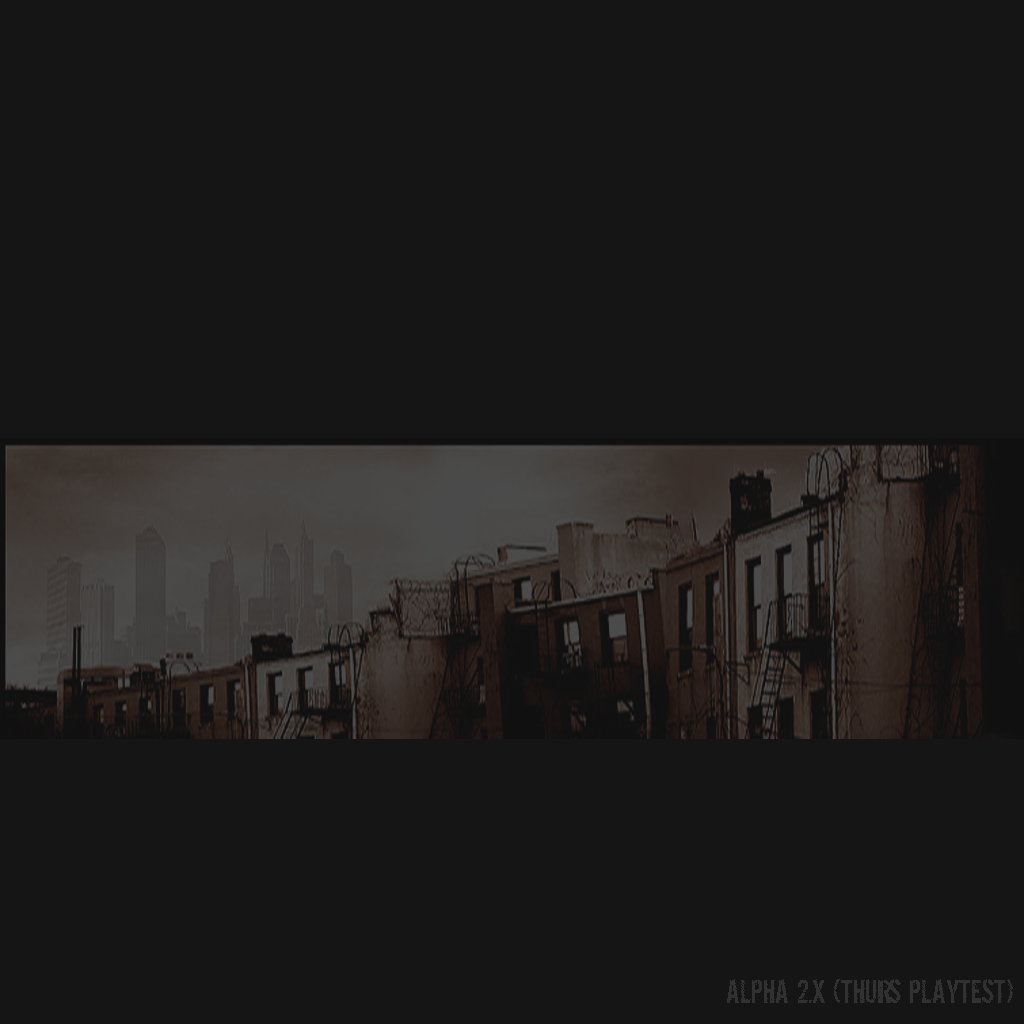
<style>
.page{position:relative;width:1024px;height:1024px;background:#151515}
.page>*{position:absolute;margin:0}
.t1{font:30px "DirtyEgo";color:#313131}
</style>
<div class="page">
<p class="t1" style="left:727px;top:979px;width:286px;height:24px">ALPHA 2.X (THURS PLAYTEST)</p>
</div>
